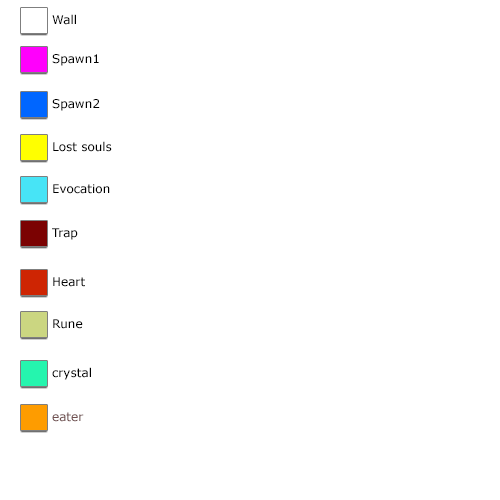
<style>
.page{position:relative;width:500px;height:500px;background:#ffffff}
.page>*{position:absolute;margin:0}
.t1{font:12px "Verdana";color:#000000}
.t2{font:12px "Verdana";color:#705050}
</style>
<div class="page">
<p class="t1" style="left:52px;top:14px;width:24px;height:11px">Wall</p>
<p class="t1" style="left:52px;top:54px;width:47px;height:12px">Spawn1</p>
<p class="t1" style="left:52px;top:99px;width:48px;height:12px">Spawn2</p>
<p class="t1" style="left:53px;top:141px;width:59px;height:11px">Lost souls</p>
<p class="t1" style="left:53px;top:184px;width:57px;height:10px">Evocation</p>
<p class="t1" style="left:52px;top:228px;width:26px;height:12px">Trap</p>
<p class="t1" style="left:53px;top:277px;width:32px;height:10px">Heart</p>
<p class="t1" style="left:53px;top:319px;width:30px;height:10px">Rune</p>
<p class="t1" style="left:52px;top:367px;width:39px;height:13px">crystal</p>
<p class="t2" style="left:52px;top:412px;width:32px;height:10px">eater</p>
</div>
